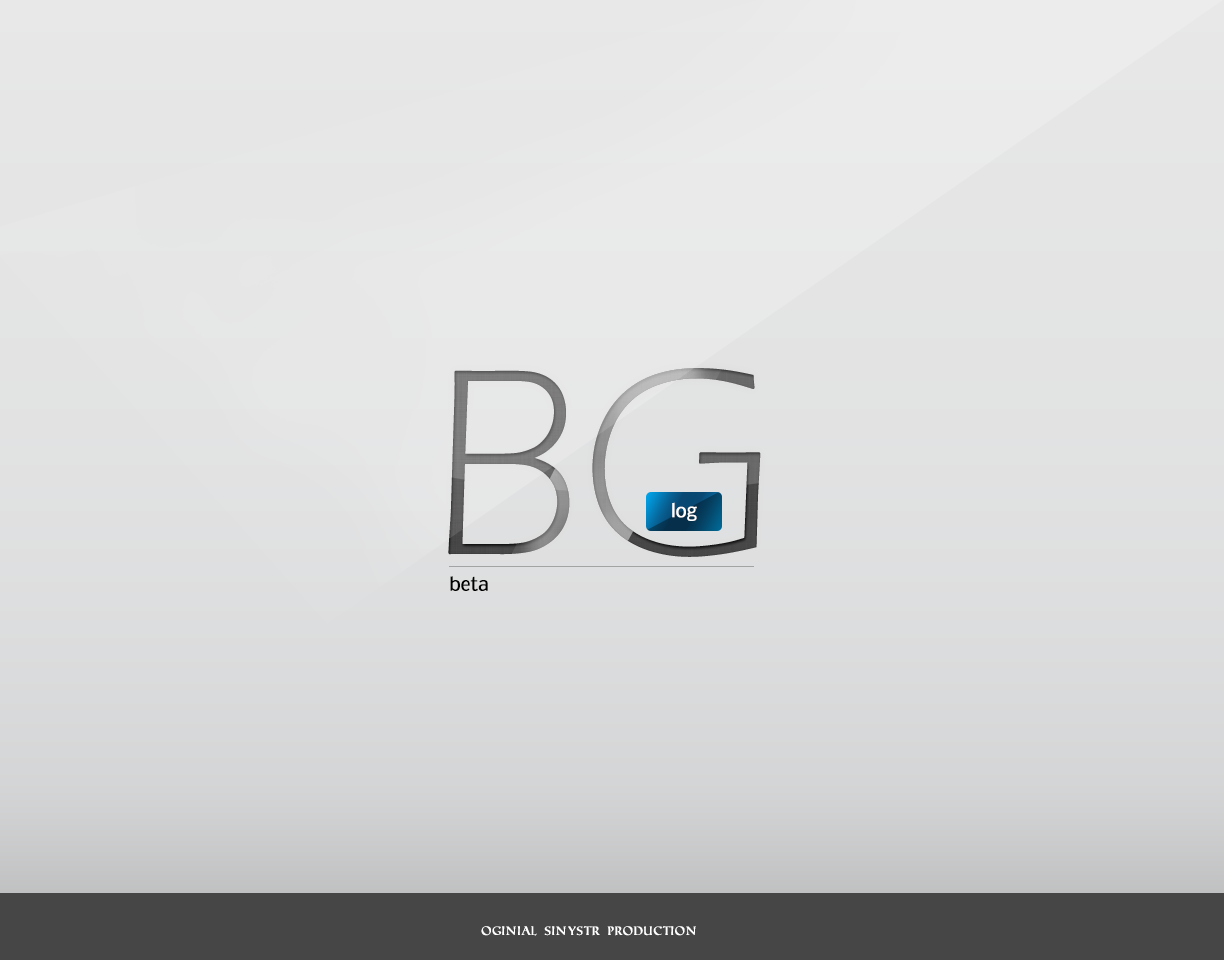
<style>
.page{position:relative;width:1224px;height:960px}
.page>*{position:absolute;margin:0}
.t1{font:272px "ErasITC-Light";letter-spacing:-0.03em;font-weight:bold}
.t2{font:18px "Nobile-Regular";letter-spacing:-0.03em;color:#ffffff;font-weight:bold}
.t3{font:18px "Nobile-Regular";letter-spacing:-0.03em;color:#000000;font-weight:bold}
.t4{font:12px "RomanSD";letter-spacing:-0.03em;color:#ffffff;font-weight:bold}
</style>
<div class="page">
<p class="t1" style="left:448px;top:368px;width:313px;height:189px">BG</p>
<p class="t2" style="left:672px;top:502px;width:25px;height:19px">log</p>
<p class="t3" style="left:450px;top:576px;width:38px;height:15px">beta</p>
<p class="t4" style="left:481px;top:926px;width:215px;height:10px">OGINIAL SINYSTR PRODUCTION</p>
</div>
